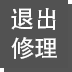
<style>
.page{position:relative;width:72px;height:72px;background:#525252}
.page>*{position:absolute;margin:0}
.t1{font:24px "AdobeHeitiStd-Regular";color:#ffffff}
</style>
<div class="page">
<p class="t1" style="left:11px;top:8px;width:46px;height:51px">退出<br>修理</p>
</div>
